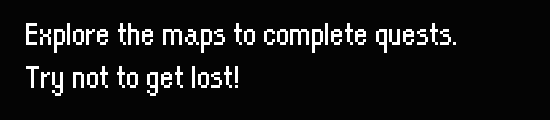
<style>
.page{position:relative;width:550px;height:120px;background:#040404}
.page>*{position:absolute;margin:0}
.t1{font:36px "OrangeKid-Regular";color:#ffffff}
</style>
<div class="page">
<p class="t1" style="left:26px;top:23px;width:430px;height:73px">Explore the maps to complete quests. <br>Try not to get lost!</p>
</div>
